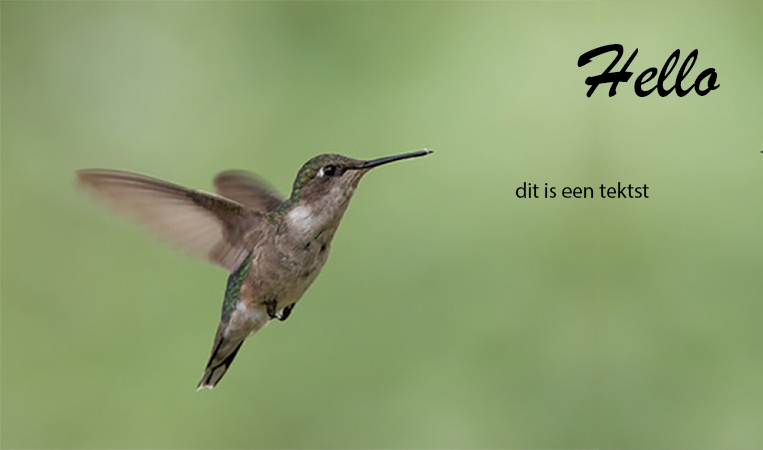
<style>
.page{position:relative;width:763px;height:450px}
.page>*{position:absolute;margin:0}
.t1{font:80px "BrushScriptMT";color:#000000}
.t2{font:80px "ChineseRocks";color:#000000}
.t3{font:21.3px "MyriadPro-Regular";color:#000000}
</style>
<div class="page">
<p class="t1" style="left:577px;top:44px;width:143px;height:54px"><span class="t2"> </span>Hello</p>
<p class="t3" style="left:515px;top:182px;width:134px;height:16px">dit is een tektst</p>
</div>
